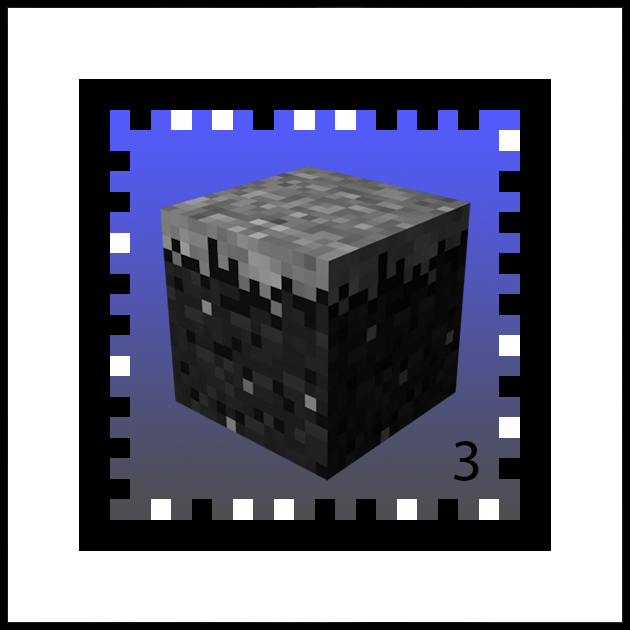
<style>
.page{position:relative;width:630px;height:630px;background:#ffffff}
.page>*{position:absolute;margin:0}
.t1{font:61.1px "MyriadPro-Regular";color:#000000;font-variant:small-caps}
</style>
<div class="page">
<p class="t1" style="left:453px;top:441px;width:26px;height:40px">3</p>
</div>
